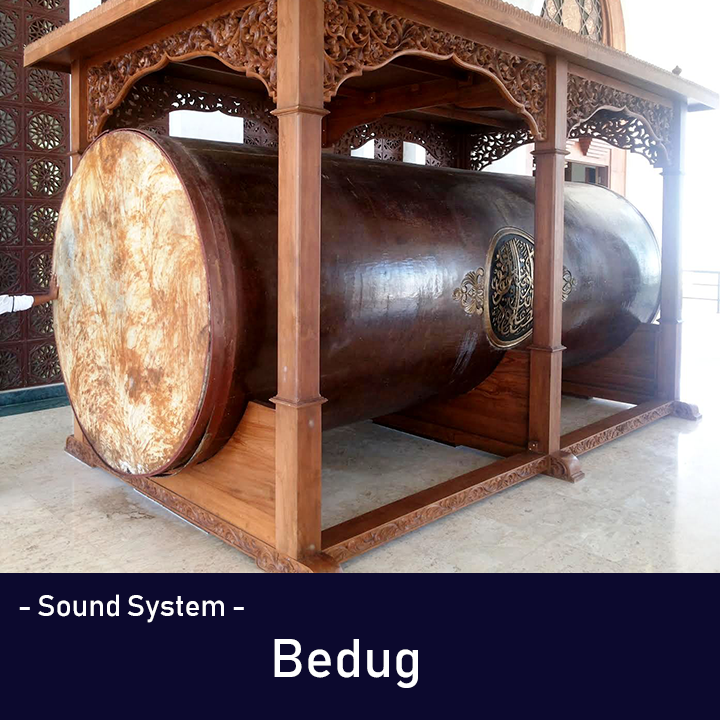
<style>
.page{position:relative;width:720px;height:720px}
.page>*{position:absolute;margin:0}
.t1{font:30px "Bahnschrift";color:#ffffff}
.t2{font:53.6px "Bahnschrift";color:#ffffff}
</style>
<div class="page">
<p class="t1" style="left:19px;top:594px;width:225px;height:29px">- Sound System -</p>
<p class="t2" style="left:274px;top:639px;width:144px;height:49px">Bedug</p>
</div>
